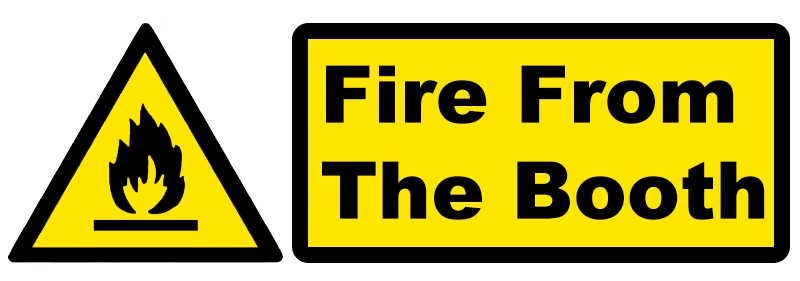
<style>
.page{position:relative;width:800px;height:281px;background:#fee600}
.page>*{position:absolute;margin:0}
.t1{font:80px "Arial-Black";color:#000000}
</style>
<div class="page">
<p class="t1" style="left:322px;top:65px;width:443px;height:155px">Fire From The Booth</p>
</div>
